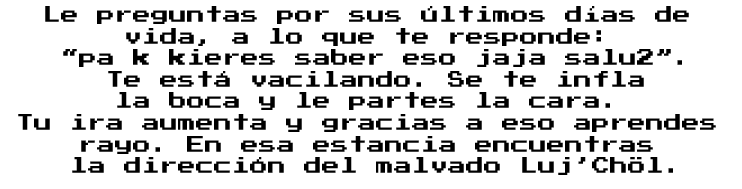
<style>
.page{position:relative;width:742px;height:189px;background:#ffffff}
.page>*{position:absolute;margin:0}
.t1{font:18px "PressStart2P";color:#000000}
</style>
<div class="page">
<p class="t1" style="left:18px;top:6px;width:698px;height:169px;text-align:center">Le preguntas por sus últimos días de <br>vida, a lo que te responde: <br>“pa k kieres saber eso jaja salu2”.<br> Te está vacilando. Se te infla <br>la boca y le partes la cara. <br>Tu ira aumenta y gracias a eso aprendes <br>rayo. En esa estancia encuentras <br>la dirección del malvado Luj’Chöl.</p>
</div>
